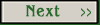
<style>
.page{position:relative;width:100px;height:25px;background:#d4d0c8}
.page>*{position:absolute;margin:0}
.t1{font:22.2px "JSChusrias";letter-spacing:0.025em;color:#29672b;font-weight:bold;scale:0.82 1}
.t2{font:22.2px "JSChusrias";letter-spacing:0.025em;color:#29672b;font-weight:bold;scale:0.49 1}
</style>
<div class="page">
<p class="t1" style="left:26px;top:5px;width:65px;height:12px">Next   <span class="t2">&gt;&gt;</span></p>
</div>
